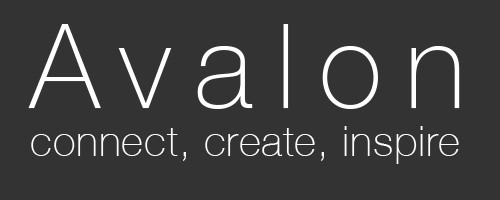
<style>
.page{position:relative;width:500px;height:200px;background:#333333}
.page>*{position:absolute;margin:0}
.t1{font:116.7px "HelveticaNeue-Thin";letter-spacing:0.2em;color:#ffffff}
.t2{font:41.7px "HelveticaNeue-Thin";letter-spacing:0.025em;color:#ffffff}
</style>
<div class="page">
<p class="t1" style="left:28px;top:24px;width:432px;height:85px">Avalon</p>
<p class="t2" style="left:31px;top:126px;width:428px;height:38px">connect, create, inspire</p>
</div>
